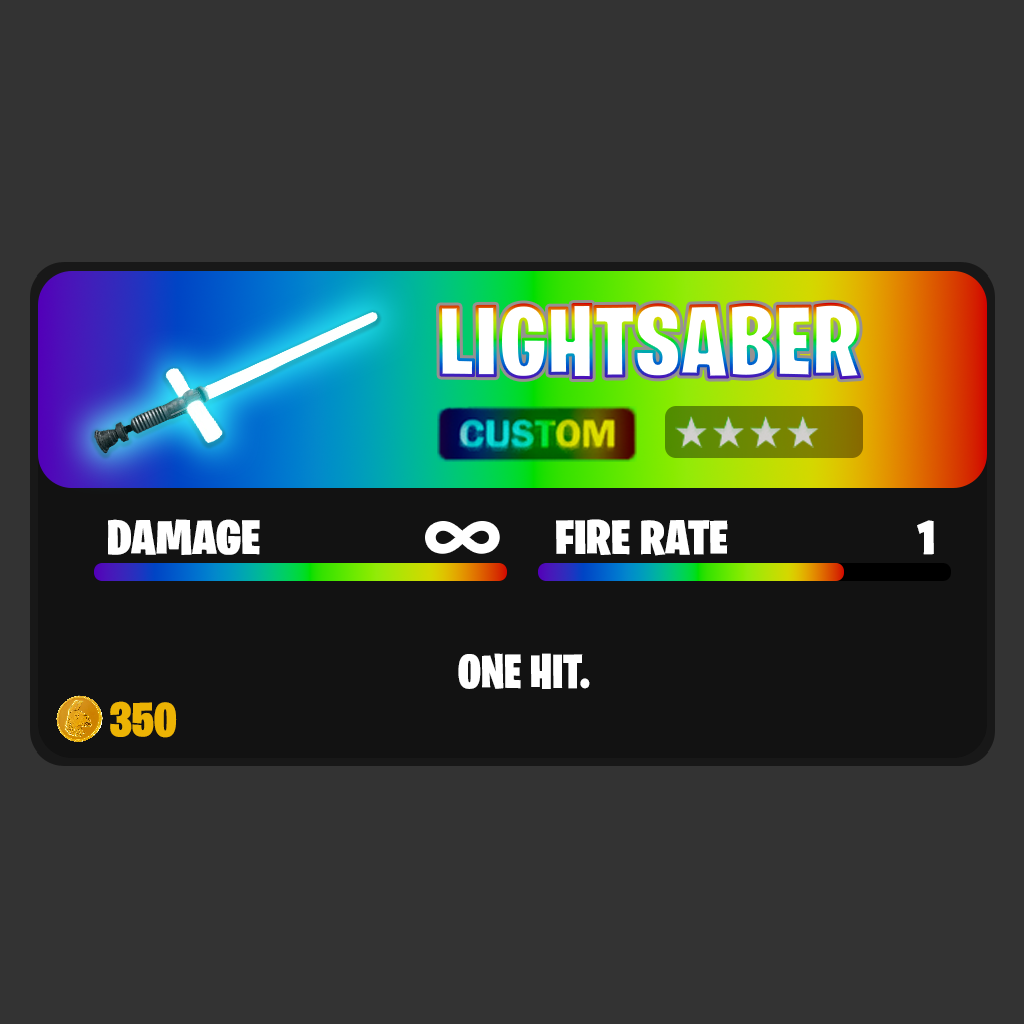
<style>
.page{position:relative;width:1024px;height:1024px;background:#333333}
.page>*{position:absolute;margin:0}
.t1{font:100.8px "BurbankBigCondensed-Black";color:#ffffff}
.t2{font:48.4px "BurbankBigCondensed-Black";color:#ffffff;scale:1.1 1}
.t3{font:48.3px "BurbankBigCondensed-Black";color:#ffffff;scale:1.1 1}
.t4{font:97.8px "MyriadPro-Regular";color:#ffffff;scale:1.1 1}
.t5{font:48px "BurbankBigCondensed-Black";color:#ffffff}
.t6{font:48px "BurbankBigCondensed-Black";color:#ecb304}
</style>
<div class="page">
<p class="t1" style="left:440px;top:303px;width:421px;height:76px">LIGHTSABER</p>
<p class="t2" style="left:108px;top:519px;width:152px;height:36px">DAMAGE</p>
<p class="t3" style="left:556px;top:519px;width:172px;height:37px">FIRE RATE</p>
<p class="t3" style="left:917px;top:520px;width:17px;height:35px">1</p>
<p class="t4" style="left:427px;top:523px;width:71px;height:29px">∞</p>
<p class="t5" style="left:458px;top:653px;width:132px;height:36px">ONE HIT.</p>
<p class="t6" style="left:110px;top:701px;width:67px;height:37px">350</p>
</div>
